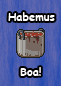
<style>
.page{position:relative;width:61px;height:86px}
.page>*{position:absolute;margin:0}
.t1{font:11px "ComicSansMS-Bold";color:#ffffff}
</style>
<div class="page">
<p class="t1" style="left:8px;top:12px;width:47px;height:9px">Habemus</p>
<p class="t1" style="left:20px;top:67px;width:21px;height:9px">Boa!</p>
</div>
